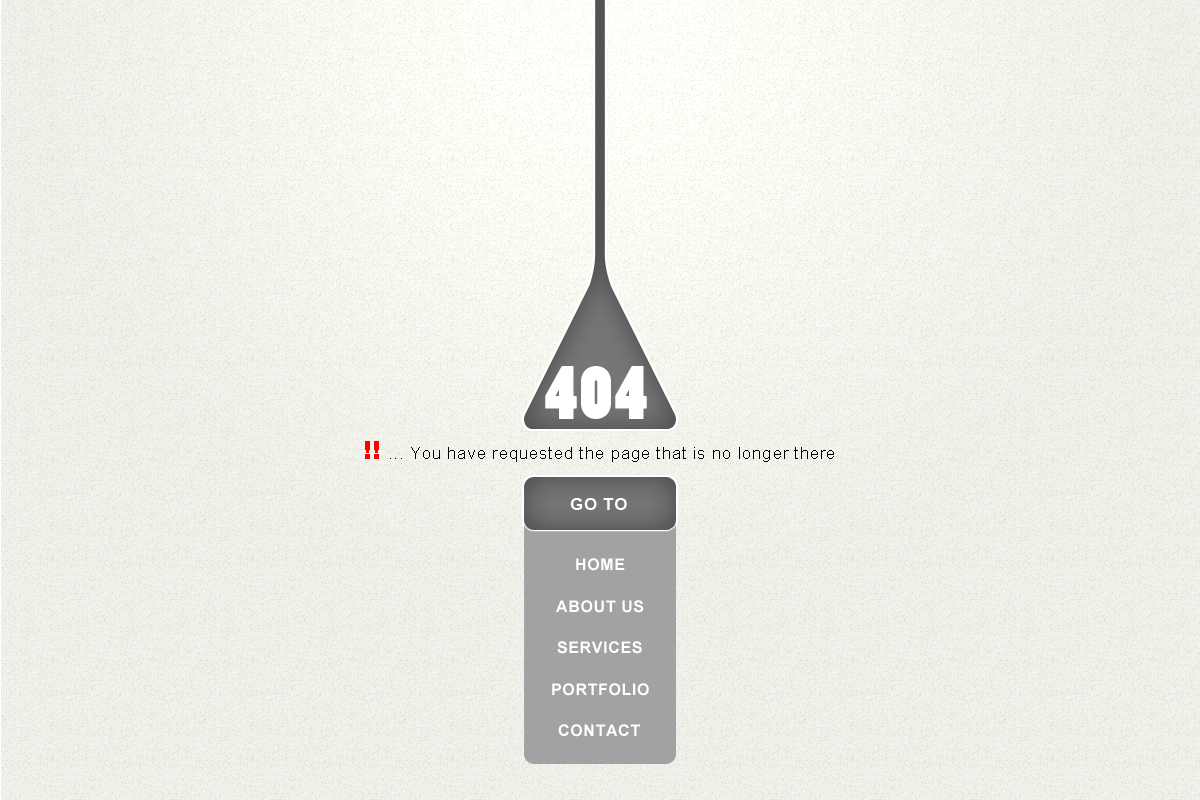
<style>
.page{position:relative;width:1200px;height:800px;background:#f1f2ec}
.page>*{position:absolute;margin:0}
.t1{font:72px "PoplarStd";letter-spacing:0.04em;color:#ffffff}
.t2{font:17px "ArialMT";letter-spacing:0.04em;color:#000000}
.t3{font:25px "Arial-Black";letter-spacing:0.04em;color:#ff0000}
.t4{font:17px "Arial-BoldMT";letter-spacing:0.04em;color:#ffffff;text-transform:uppercase}
.t5{font:16px "Arial-BoldMT";letter-spacing:0.04em;color:#ffffff;text-transform:uppercase}
</style>
<div class="page">
<p class="t1" style="left:545px;top:366px;width:102px;height:53px">404</p>
<p class="t2" style="left:365px;top:441px;width:469px;height:21px"><span class="t3">!!</span> ... You have requested the page that is no longer there</p>
<p class="t4" style="left:570px;top:498px;width:57px;height:12px">go to</p>
<p class="t5" style="left:576px;top:558px;width:49px;height:13px">Home</p>
<p class="t5" style="left:556px;top:600px;width:88px;height:13px">About Us</p>
<p class="t5" style="left:557px;top:641px;width:85px;height:13px">Services</p>
<p class="t5" style="left:552px;top:683px;width:97px;height:13px">Portfolio</p>
<p class="t5" style="left:558px;top:724px;width:82px;height:13px">Contact</p>
</div>
